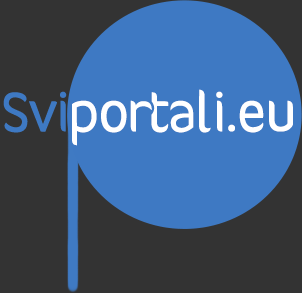
<style>
.page{position:relative;width:302px;height:293px;background:#333333}
.page>*{position:absolute;margin:0}
.t1{font:60px "Giger";color:#ffffff}
.t2{font:60px "Giger";color:#3e79c3}
</style>
<div class="page">
<p class="t1" style="left:3px;top:89px;width:290px;height:57px"><span class="t2">Svi</span>portali.eu</p>
</div>
